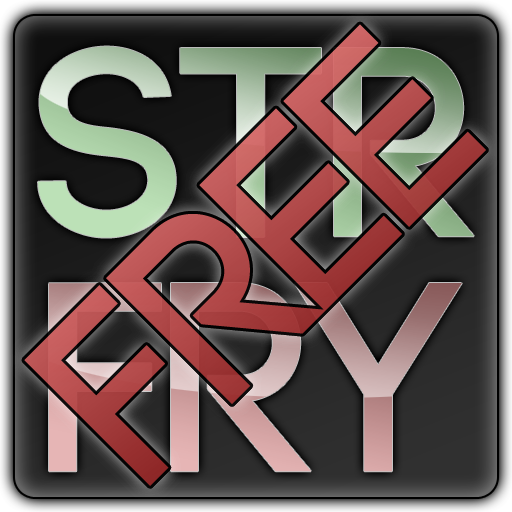
<style>
.page{position:relative;width:512px;height:512px}
.page>*{position:absolute;margin:0}
.t1{font:254.2px "Code-Bold";color:#b14a4a}
.t2{font:268.2px "Code-Bold"}
</style>
<div class="page">
<p class="t1" style="left:24px;top:24px;width:462px;height:462px;rotate:-45deg">FREE</p>
<p class="t1" style="left:24px;top:24px;width:462px;height:462px;rotate:-45deg">FREE</p>
<p class="t1" style="left:24px;top:24px;width:462px;height:462px;rotate:-45deg">FREE</p>
<p class="t2" style="left:38px;top:46px;width:436px;height:192px">Str</p>
<p class="t2" style="left:49px;top:283px;width:413px;height:189px">FRY</p>
</div>
